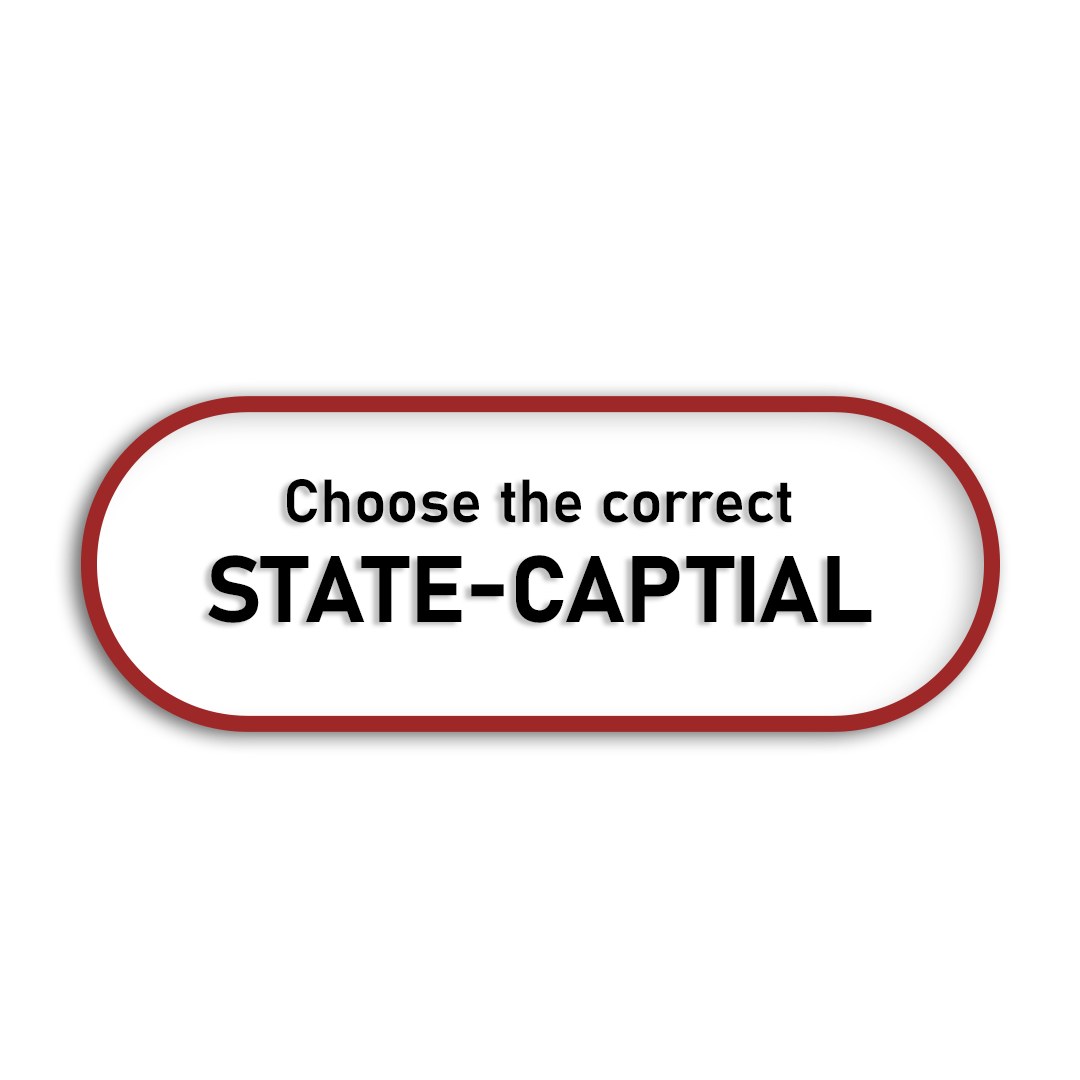
<style>
.page{position:relative;width:1080px;height:1080px;background:#ffffff}
.page>*{position:absolute;margin:0}
.t1{font:60px/76px "Bahnschrift-SemiBold";color:#000000}
.t2{font:93px/100px "Bahnschrift-Bold";color:#000000;text-transform:uppercase}
</style>
<div class="page">
<p class="t1" style="left:208px;top:479px;width:664px;height:144px;text-align:center">Choose the correct<br><span class="t2">state-captial</span></p>
</div>
